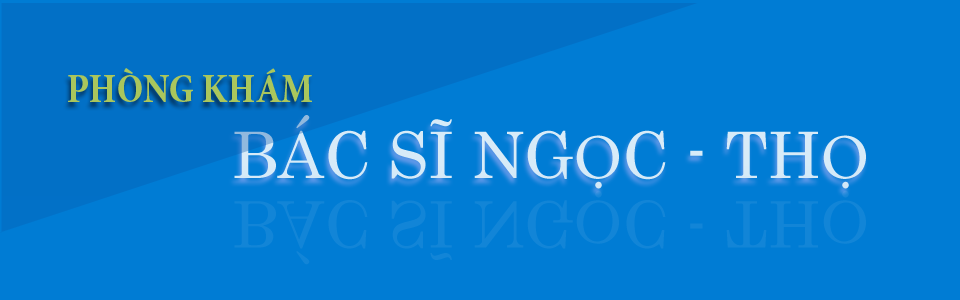
<style>
.page{position:relative;width:960px;height:300px;background:#007cd4}
.page>*{position:absolute;margin:0}
.t1{font:40px "MinionPro-BoldCn";color:#aac65c}
.t2{font:64px "Century";color:#d8ebf8}
.t3{font:64px "MinionPro-Regular";color:#d8ebf8}
</style>
<div class="page">
<p class="t1" style="left:68px;top:68px;width:244px;height:34px">PHÒNG KHÁM</p>
<p class="t2" style="left:234px;top:115px;width:632px;height:74px">BÁC SĨ NG<span class="t3">Ọ</span>C - TH<span class="t3">Ọ</span></p>
</div>
